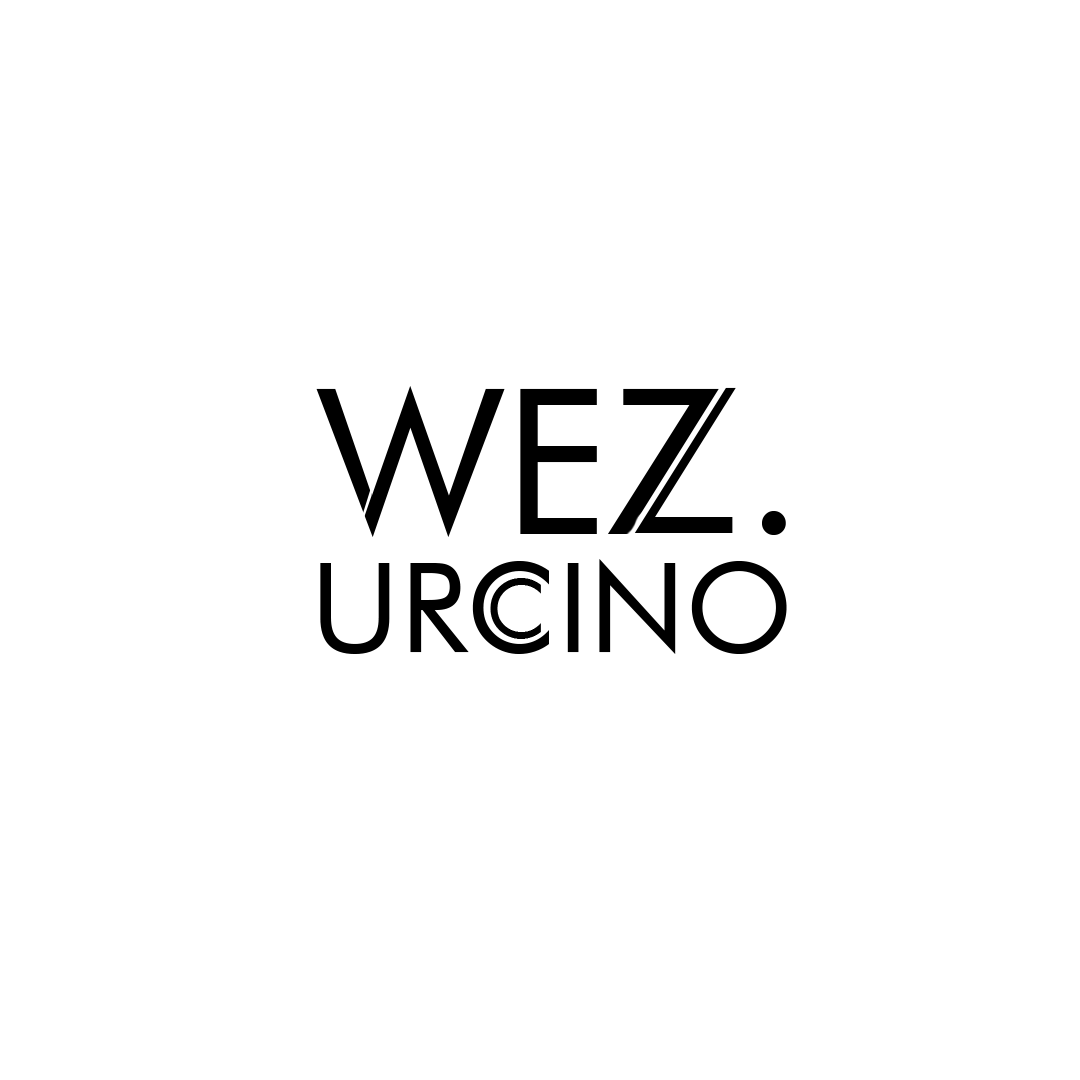
<style>
.page{position:relative;width:1080px;height:1080px;background:#ffffff}
.page>*{position:absolute;margin:0}
.t1{font:124.6px "FuturaBT-Book";color:#000000}
.t2{font:82.3px "FuturaBT-Book";color:#000000}
</style>
<div class="page">
<p class="t1" style="left:320px;top:559px;width:467px;height:95px">URCINO</p>
<p class="t2" style="left:490px;top:578px;width:51px;height:61px">C</p>
</div>
